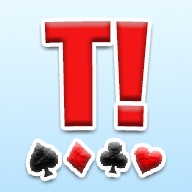
<style>
.page{position:relative;width:192px;height:192px}
.page>*{position:absolute;margin:0}
.t1{font:132.1px "Impact";color:#f41616}
</style>
<div class="page">
<p class="t1" style="left:44px;top:21px;width:104px;height:106px">T!</p>
</div>
